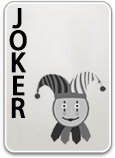
<style>
.page{position:relative;width:115px;height:158px}
.page>*{position:absolute;margin:0}
.t1{font:25.2px "AdobeHeitiStd-Regular";color:#000000;text-transform:uppercase;font-weight:bold}
</style>
<div class="page">
<p class="t1" style="left:12px;top:8px;width:10px;height:21px">J</p>
<p class="t1" style="left:9px;top:30px;width:18px;height:21px">O</p>
<p class="t1" style="left:11px;top:52px;width:15px;height:21px">K</p>
<p class="t1" style="left:13px;top:75px;width:12px;height:21px">E</p>
<p class="t1" style="left:11px;top:97px;width:15px;height:21px">R</p>
</div>
